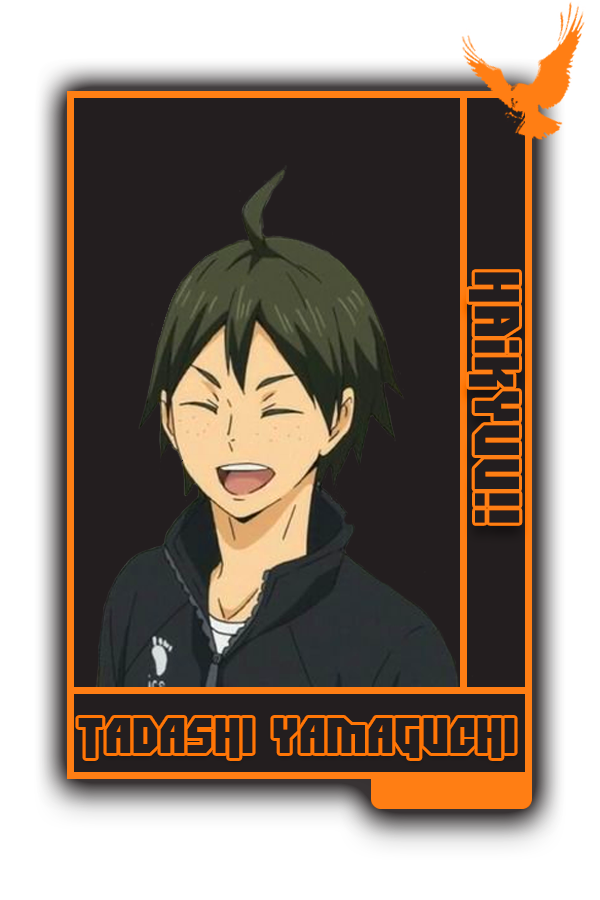
<style>
.page{position:relative;width:600px;height:900px;background:#231e1f}
.page>*{position:absolute;margin:0}
.t1{font:62.9px "Dimitri";color:#231f20}
.t2{font:50.5px "Dimitri";color:#231f20}
</style>
<div class="page">
<p class="t1" style="left:469px;top:272px;width:51px;height:251px;rotate:90deg">Haikyuu!!</p>
<p class="t2" style="left:78px;top:718px;width:437px;height:40px">TADASHI YAMAGUCHI</p>
</div>
